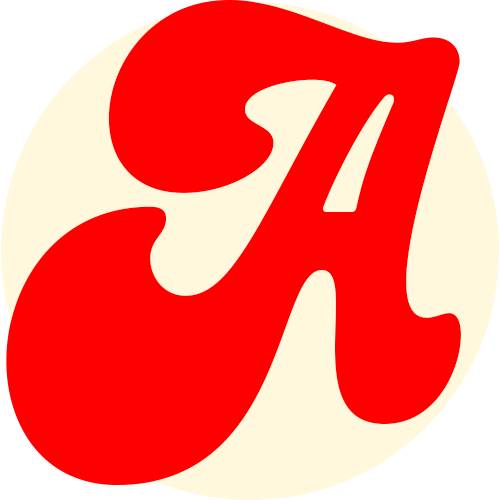
<style>
.page{position:relative;width:500px;height:500px;background:#ff0000}
.page>*{position:absolute;margin:0}
.t1{font:659.8px "Gvtime-Regular";color:#ff0000}
</style>
<div class="page">
<p class="t1" style="left:6px;top:0px;width:455px;height:485px">A</p>
</div>
